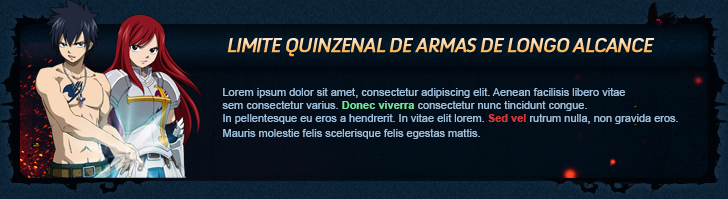
<style>
.page{position:relative;width:728px;height:199px}
.page>*{position:absolute;margin:0}
.t1{font:20px "Anivers-Regular";letter-spacing:-0.05em;text-transform:uppercase;font-weight:bold;font-style:italic}
.t2{font:11px "ArialMT";color:#9fc0dd}
.t3{font:11px "Arial-BoldMT";color:#76e698}
.t4{font:11px "Arial-BoldMT";color:#d5383a}
</style>
<div class="page">
<p class="t1" style="left:227px;top:37px;width:428px;height:20px">LIMITE QUINZENAL DE ARMAS DE LONGO ALCANCE</p>
<p class="t2" style="left:222px;top:88px;width:456px;height:51px">Lorem ipsum dolor sit amet, consectetur adipiscing elit. Aenean facilisis libero vitae <br>sem consectetur varius. <span class="t3">Donec viverra</span> consectetur nunc tincidunt congue. <br>In pellentesque eu eros a hendrerit. In vitae elit lorem. <span class="t4">Sed vel</span> rutrum nulla, non gravida eros. <br>Mauris molestie felis scelerisque felis egestas mattis.</p>
</div>
